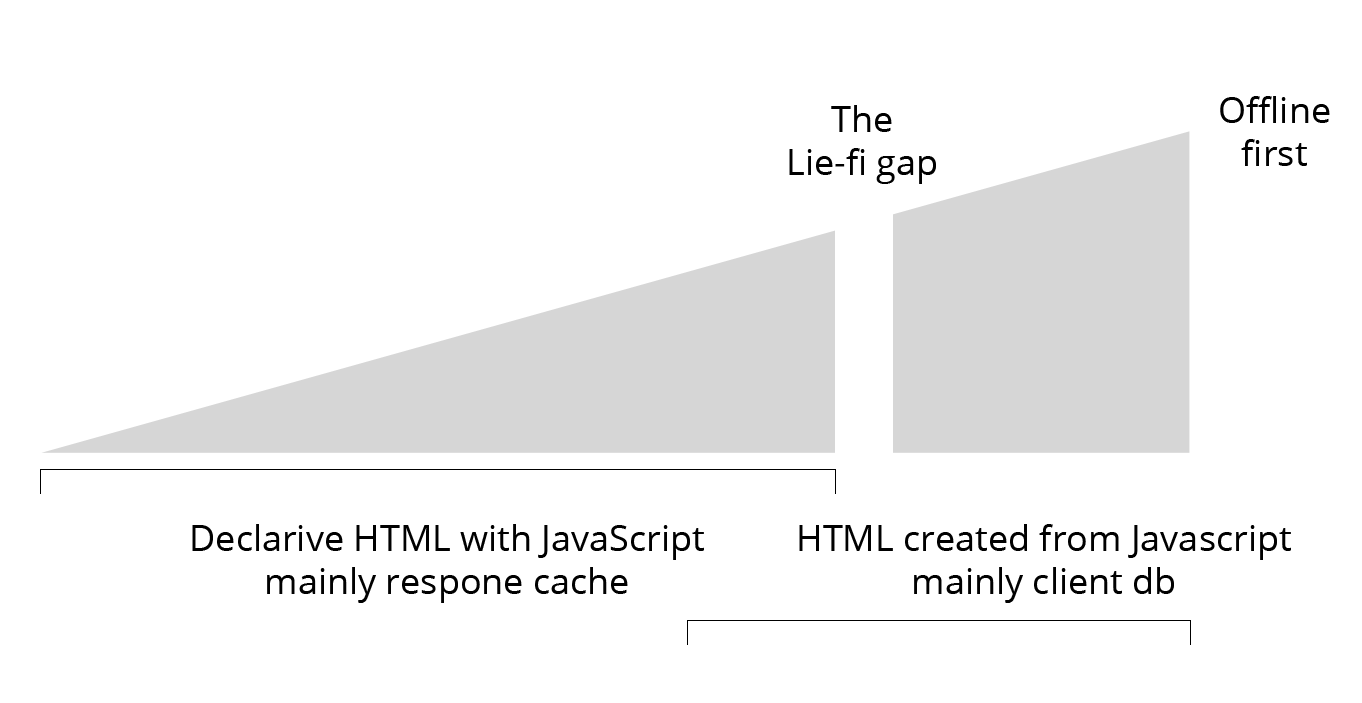
<style>
.page{position:relative;width:1362px;height:703px;background:#ffffff}
.page>*{position:absolute;margin:0}
.t1{font:36px "OpenSans";color:#000000}
</style>
<div class="page">
<p class="t1" style="left:1220px;top:96px;width:110px;height:70px;text-align:center">Offline<br>first</p>
<p class="t1" style="left:789px;top:105px;width:147px;height:79px;text-align:center">The<br>Lie-fi gap</p>
<p class="t1" style="left:192px;top:524px;width:512px;height:79px;text-align:center">Declarive HTML with JavaScript<br>mainly respone cache</p>
<p class="t1" style="left:799px;top:524px;width:492px;height:79px;text-align:center">HTML created from Javascript<br>mainly client db</p>
</div>
